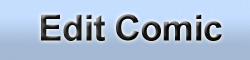
<style>
.page{position:relative;width:250px;height:60px}
.page>*{position:absolute;margin:0}
.t1{font:36px "Arial-BoldMT";letter-spacing:-0.01em}
</style>
<div class="page">
<p class="t1" style="left:41px;top:14px;width:181px;height:27px">Edit Comic</p>
</div>
